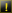
<style>
.page{position:relative;width:12px;height:13px}
.page>*{position:absolute;margin:0}
.t1{font:11.4px "Calibri-Bold";color:#efd817;scale:1.06 1}
</style>
<div class="page">
<p class="t1" style="left:5px;top:3px;width:3px;height:9px">!</p>
</div>
